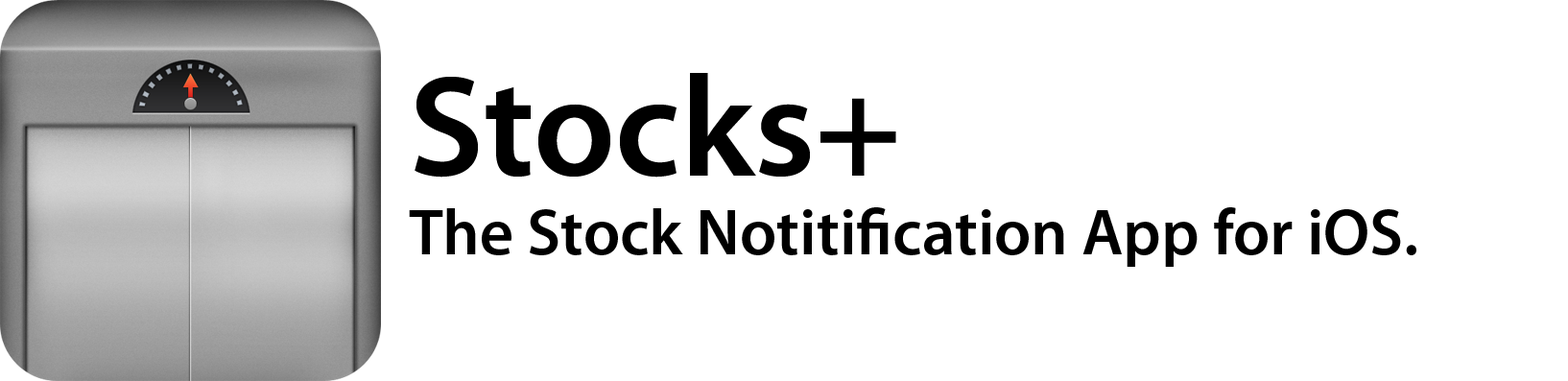
<style>
.page{position:relative;width:1568px;height:381px;background:#ffffff}
.page>*{position:absolute;margin:0}
.t1{font:65.3px "MyriadPro-Semibold";color:#000000}
.t2{font:144.9px "MyriadPro-Semibold";color:#000000}
</style>
<div class="page">
<p class="t1" style="left:409px;top:73px;width:1007px;height:194px"><span class="t2">Stocks+<br></span>The Stock Notitification App for iOS.</p>
</div>
